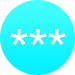
<style>
.page{position:relative;width:75px;height:75px;background:#ffffff}
.page>*{position:absolute;margin:0}
.t1{font:40px "Aldrich-Regular";letter-spacing:-0.08em;color:#ffffff}
</style>
<div class="page">
<p class="t1" style="left:10px;top:29px;width:56px;height:16px">***</p>
</div>
